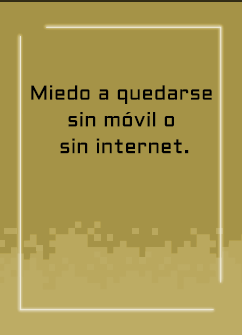
<style>
.page{position:relative;width:242px;height:335px;background:#a59347}
.page>*{position:absolute;margin:0}
.t1{font:20px/26.7px "Aldrich-Regular";letter-spacing:0.015em;color:#000000}
</style>
<div class="page">
<p class="t1" style="left:31px;top:85px;width:181px;height:69px;text-align:center">Miedo a quedarse <br>sin móvil o <br>sin internet.</p>
</div>
